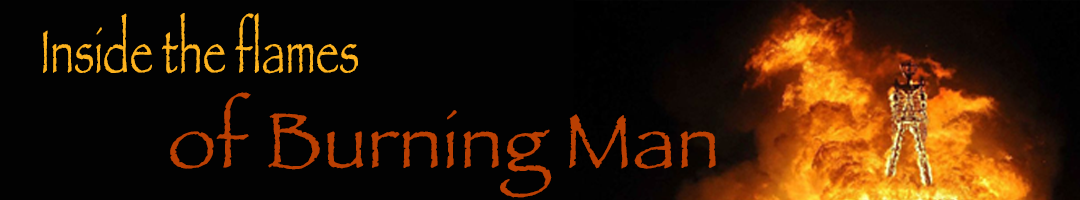
<style>
.page{position:relative;width:1080px;height:200px;background:#020202}
.page>*{position:absolute;margin:0}
.t1{font:62.7px "Papyrus-Condensed";color:#fdb31e}
.t2{font:79.8px "Papyrus";color:#ba3f02}
</style>
<div class="page">
<p class="t1" style="left:43px;top:13px;width:315px;height:61px">Inside the flames</p>
<p class="t2" style="left:170px;top:92px;width:546px;height:106px">of Burning Man</p>
</div>
